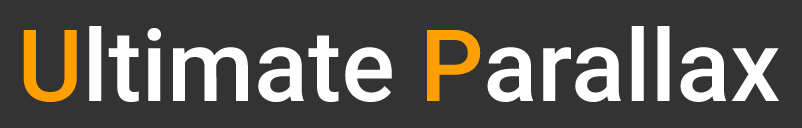
<style>
.page{position:relative;width:802px;height:128px;background:#333333}
.page>*{position:absolute;margin:0}
.t1{font:100px "Roboto-Medium";color:#ffffff}
.t2{font:100px "Roboto-Medium";color:#ffa000}
</style>
<div class="page">
<p class="t1" style="left:23px;top:26px;width:756px;height:76px"><span class="t2">U</span>ltimate <span class="t2">P</span>arallax</p>
</div>
